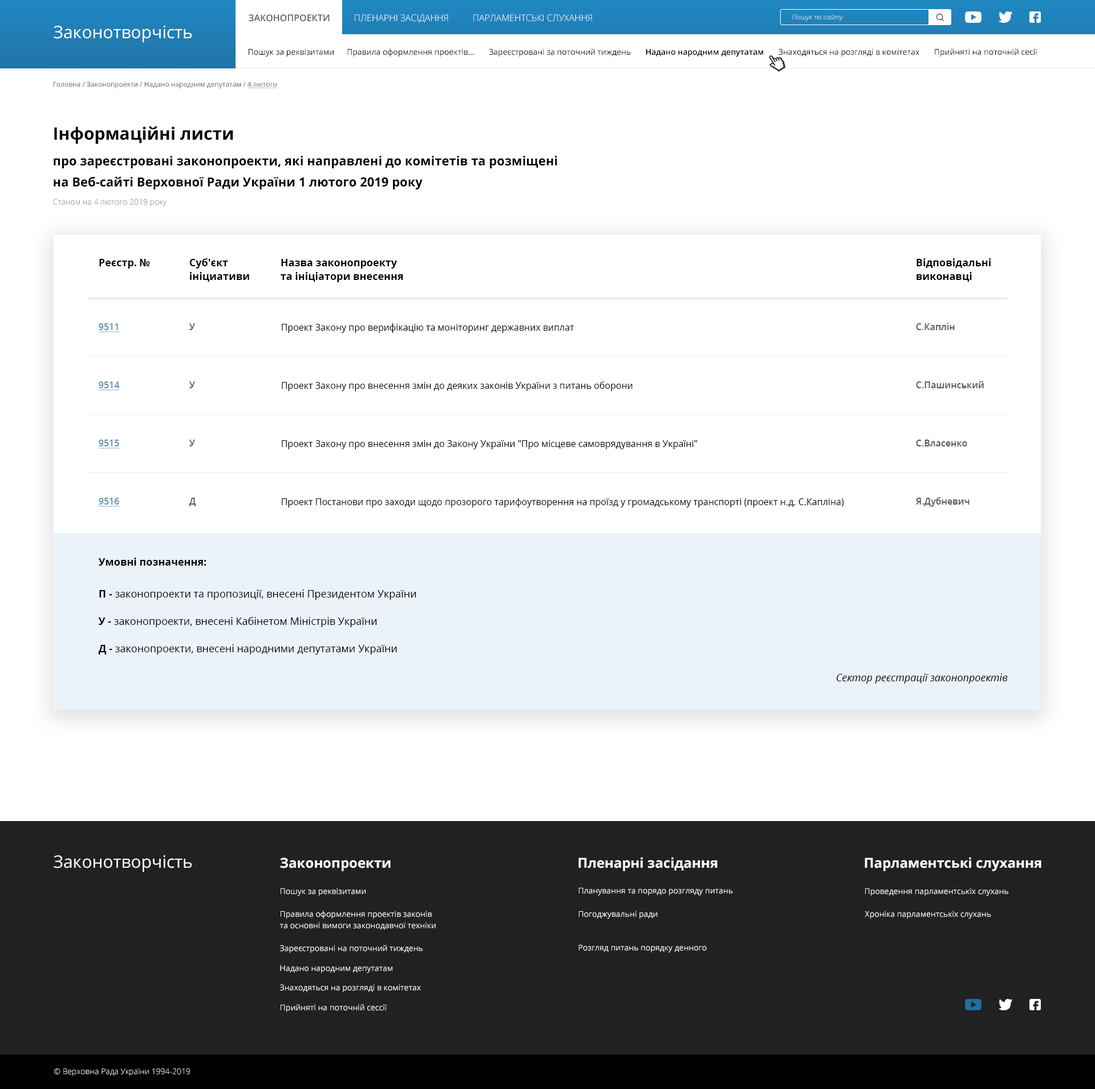
<style>
.page{position:relative;width:1095px;height:1089px;background:#ffffff}
.page>*{position:absolute;margin:0}
.t1{font:9.1px "OpenSans-SemiBold";color:#585858;text-transform:uppercase}
.t2{font:9.1px "OpenSans-Light";color:#ffffff;text-transform:uppercase}
.t3{font:6.8px "OpenSans-LightItalic";color:#ffffff}
.t4{font:17.1px "OpenSans-Regular";color:#ffffff}
.t5{font:8px "OpenSans-Regular";color:#000000}
.t6{font:8px "OpenSans-SemiBold";color:#000000}
.t7{font:6.8px "OpenSans-Regular";color:#585858}
.t8{font:6.8px "OpenSans-Regular";color:#585858;text-decoration:underline}
.t9{font:12.5px/25.7px "OpenSans-Bold";color:#000000}
.t10{font:17.1px/21.1px "OpenSans-Bold";color:#000000}
.t11{font:12.5px/21.1px "OpenSans-Bold";color:#000000}
.t12{font:8px "OpenSans-Light";color:#737373}
.t13{font:10.3px "OpenSans-Bold";color:#000000}
.t14{font:10.3px/13.7px "OpenSans-Bold";color:#000000}
.t15{font:9.1px "OpenSans-SemiBold";color:#6592b5;text-decoration:underline}
.t16{font:9.1px "OpenSans-SemiBold";color:#585858}
.t17{font:9.1px "OpenSans-Regular";color:#000000}
.t18{font:10.3px/13.7px "OpenSans-Regular";color:#000000}
.t19{font:10.3px "OpenSans-Italic";color:#000000}
.t20{font:13.7px "OpenSans-Bold";color:#ffffff}
.t21{font:8px "OpenSans-Regular";color:#ffffff}
.t22{font:8px/11.4px "OpenSans-Regular";color:#ffffff}
.t23{font:8px/14.8px "OpenSans-Regular";color:#ffffff}
.t24{font:8px "OpenSans-Light";color:#ffffff}
</style>
<div class="page">
<p class="t1" style="left:249px;top:14px;width:81px;height:8px">Законопроекти</p>
<p class="t2" style="left:355px;top:14px;width:93px;height:9px">пленарні засідання</p>
<p class="t2" style="left:473px;top:14px;width:119px;height:8px">парламентські слухання</p>
<p class="t3" style="left:792px;top:14px;width:51px;height:7px">Пошук по сайту</p>
<p class="t4" style="left:54px;top:26px;width:138px;height:17px">Законотворчість</p>
<p class="t5" style="left:249px;top:48px;width:788px;height:9px">Пошук за реквізитами      Правила оформлення проектів...       Зареєстровані за поточний тиждень       <span class="t6">Надано народним депутатам</span>       Знаходяться на розгляді в комітетах       Прийняті на поточній сесії</p>
<p class="t7" style="left:53px;top:82px;width:224px;height:6px">Головна / Законопроекти / Надано народним депутатам / <span class="t8">4 лютого</span></p>
<p class="t9" style="left:54px;top:126px;width:503px;height:64px"><span class="t10">Інформаційні листи<br></span>про зареєстровані законопроекти, які направлені до комітетів та розміщені <br><span class="t11">на Веб-сайті Верховної Ради України 1 лютого 2019 року</span></p>
<p class="t12" style="left:53px;top:198px;width:114px;height:9px">Станом на 4 лютого 2019 року</p>
<p class="t13" style="left:99px;top:259px;width:51px;height:10px">Реєстр. №</p>
<p class="t14" style="left:189px;top:258px;width:60px;height:24px">Суб'єкт <br>ініциативи</p>
<p class="t14" style="left:281px;top:259px;width:122px;height:23px">Назва законопроекту <br>та ініціатори внесення</p>
<p class="t14" style="left:916px;top:258px;width:74px;height:24px">Відповідальні <br>виконавці</p>
<p class="t15" style="left:98px;top:323px;width:22px;height:9px">9511</p>
<p class="t16" style="left:189px;top:323px;width:6px;height:7px">У</p>
<p class="t17" style="left:282px;top:323px;width:292px;height:10px">Проект Закону про верифікацію та моніторинг державних виплат</p>
<p class="t16" style="left:916px;top:323px;width:39px;height:7px">С.Каплін</p>
<p class="t15" style="left:98px;top:381px;width:22px;height:10px">9514</p>
<p class="t16" style="left:189px;top:381px;width:6px;height:7px">У</p>
<p class="t17" style="left:282px;top:381px;width:350px;height:10px">Проект Закону про внесення змін до деяких законів України з питань оборони</p>
<p class="t16" style="left:916px;top:381px;width:68px;height:7px">С.Пашинський</p>
<p class="t15" style="left:98px;top:440px;width:22px;height:9px">9515</p>
<p class="t16" style="left:189px;top:440px;width:6px;height:6px">У</p>
<p class="t17" style="left:282px;top:440px;width:415px;height:9px">Проект Закону про внесення змін до Закону України "Про місцеве самоврядування в Україні"</p>
<p class="t16" style="left:916px;top:440px;width:51px;height:6px">С.Власенко</p>
<p class="t15" style="left:98px;top:498px;width:22px;height:9px">9516</p>
<p class="t16" style="left:189px;top:498px;width:7px;height:8px">Д</p>
<p class="t17" style="left:282px;top:498px;width:562px;height:10px">Проект Постанови про заходи щодо прозорого тарифоутворення на проїзд у громадському транспорті (проект н.д. С.Капліна)</p>
<p class="t16" style="left:916px;top:497px;width:53px;height:10px">Я.Дубневич</p>
<p class="t13" style="left:98px;top:558px;width:108px;height:8px">Умовні позначення:</p>
<p class="t18" style="left:98px;top:590px;width:318px;height:65px"><span class="t14">П - </span>законопроекти та пропозиції, внесені Президентом України<br><br><span class="t14">У - </span>законопроекти, внесені Кабінетом Міністрів України<br><br><span class="t14">Д - </span>законопроекти, внесені народними депутатами України</p>
<p class="t19" style="left:837px;top:673px;width:171px;height:11px">Сектор реєстрації законопроектів</p>
<p class="t4" style="left:54px;top:855px;width:138px;height:17px">Законотворчість</p>
<p class="t20" style="left:280px;top:858px;width:111px;height:13px">Законопроекти</p>
<p class="t20" style="left:578px;top:857px;width:139px;height:14px">Пленарні засідання</p>
<p class="t20" style="left:864px;top:857px;width:177px;height:14px">Парламентські слухання</p>
<p class="t21" style="left:281px;top:888px;width:85px;height:8px">Пошук за реквізитами</p>
<p class="t21" style="left:579px;top:888px;width:154px;height:8px">Планування та порядо розгляду питань</p>
<p class="t21" style="left:865px;top:888px;width:143px;height:8px">Проведення парламентськіх слухань</p>
<p class="t22" style="left:279px;top:911px;width:157px;height:19px"><span class="t23">Правила оформлення проектів законів<br></span>та основні вимоги законодавчої техніки</p>
<p class="t21" style="left:579px;top:911px;width:78px;height:8px">Погоджувальні ради</p>
<p class="t21" style="left:864px;top:911px;width:127px;height:8px">Хроніка парламентськіх слухань</p>
<p class="t21" style="left:280px;top:945px;width:143px;height:8px">Зареєстровані на поточний тиждень</p>
<p class="t21" style="left:579px;top:945px;width:128px;height:8px">Розгляд питань порядку денного</p>
<p class="t21" style="left:280px;top:965px;width:112px;height:8px">Надано народним депутатам</p>
<p class="t21" style="left:280px;top:984px;width:141px;height:9px">Знаходяться на розгляді в комітетах</p>
<p class="t21" style="left:281px;top:1004px;width:106px;height:9px">Прийняті на поточній сессії</p>
<p class="t24" style="left:54px;top:1068px;width:136px;height:9px">© Верховна Рада України 1994-2019</p>
</div>
